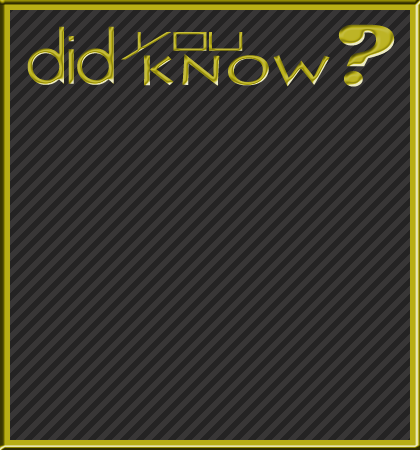
<style>
.page{position:relative;width:420px;height:450px;background:#242323}
.page>*{position:absolute;margin:0}
.t1{font:79.6px "BelleroseLight"}
.t2{font:87.4px "Magneto-Bold";scale:1.13 1}
.t3{font:37.6px "Cubos-Regular";scale:1.49 1}
.t4{font:48px "LithosPro-Regular";scale:1.27 1}
</style>
<div class="page">
<p class="t1" style="left:27px;top:26px;width:87px;height:59px">did</p>
<p class="t2" style="left:338px;top:24px;width:57px;height:63px">?</p>
<p class="t3" style="left:121px;top:32px;width:122px;height:28px">you</p>
<p class="t4" style="left:144px;top:54px;width:186px;height:33px">know</p>
</div>
